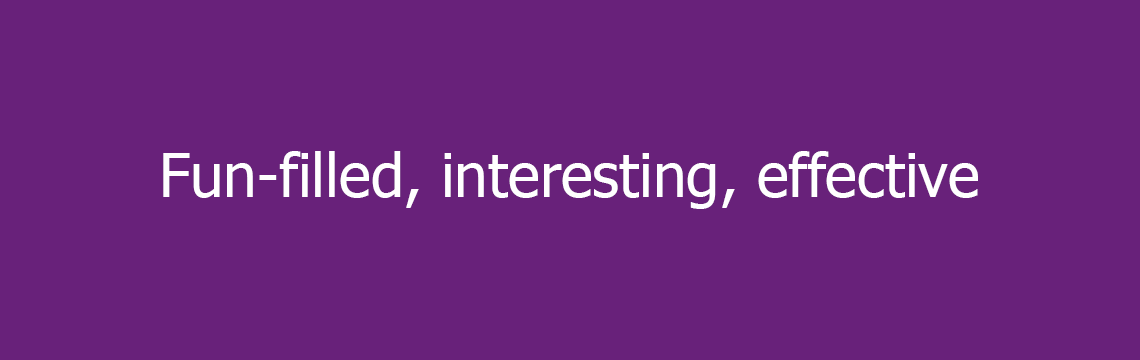
<style>
.page{position:relative;width:1140px;height:360px;background:#68217a}
.page>*{position:absolute;margin:0}
.t1{font:60px "Tahoma";color:#ffffff}
</style>
<div class="page">
<p class="t1" style="left:163px;top:151px;width:815px;height:58px">Fun-filled, interesting, effective</p>
</div>
